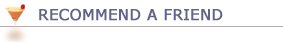
<style>
.page{position:relative;width:283px;height:42px;background:#ffffff}
.page>*{position:absolute;margin:0}
.t1{font:15px "Verdana";color:#636388;font-weight:bold}
</style>
<div class="page">
<p class="t1" style="left:39px;top:8px;width:184px;height:13px">RECOMMEND A FRIEND</p>
</div>
